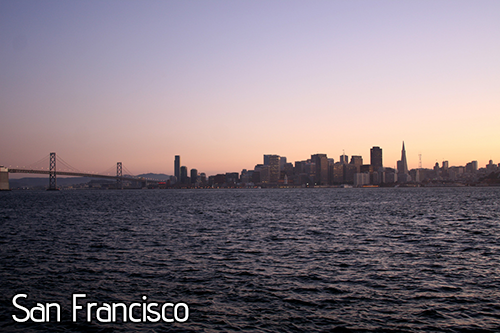
<style>
.page{position:relative;width:500px;height:333px}
.page>*{position:absolute;margin:0}
.t1{font:36px "advent-ExtraBold";color:#ffffff}
</style>
<div class="page">
<p class="t1" style="left:12px;top:294px;width:177px;height:28px">San Francisco</p>
</div>
